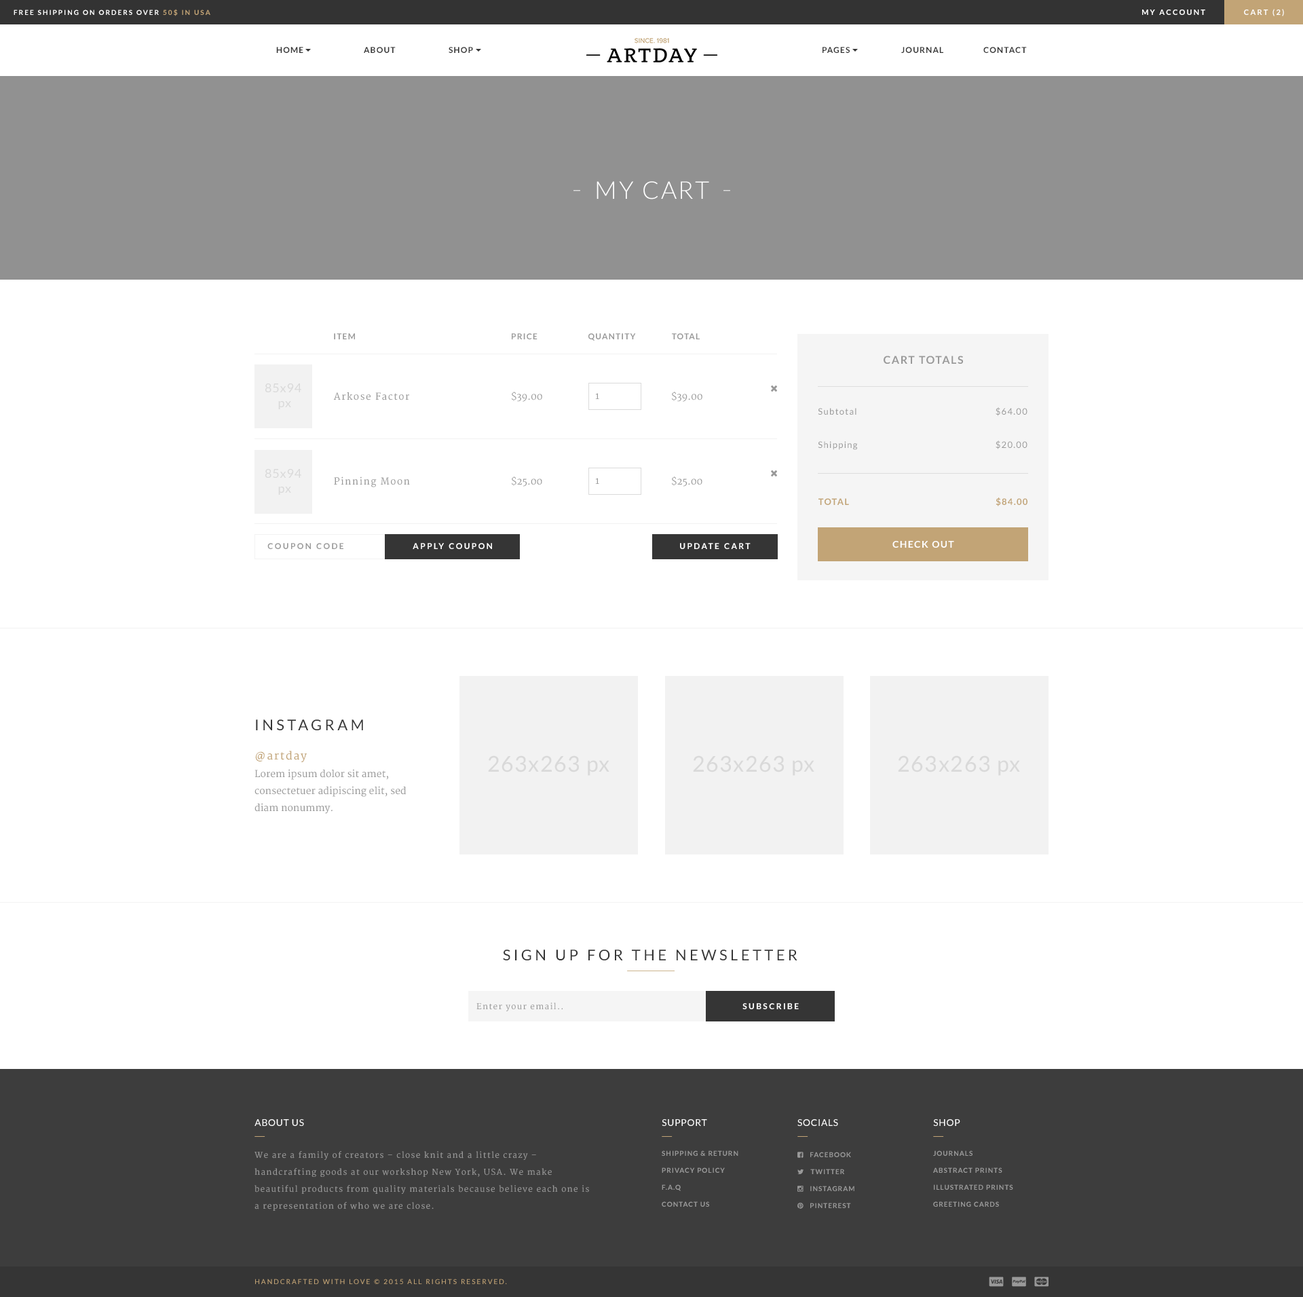
<style>
.page{position:relative;width:1303px;height:1297px;background:#ffffff}
.page>*{position:absolute;margin:0}
.t1{font:6.8px "Lato-Bold";letter-spacing:0.2em;color:#ffffff;text-transform:uppercase}
.t2{font:6.8px "Lato-Bold";letter-spacing:0.2em;color:#c2a476;text-transform:uppercase}
.t3{font:7.5px "Lato-Bold";letter-spacing:0.2em;color:#ffffff;text-transform:uppercase}
.t4{font:8.1px "Lato-Bold";letter-spacing:0.1em;color:#353535;text-transform:uppercase}
.t5{font:24.4px "Lato-Light";letter-spacing:0.075em;color:#ffffff;text-transform:uppercase}
.t6{font:8.1px "Lato-Bold";letter-spacing:0.1em;color:#999999;text-transform:uppercase}
.t7{font:10.9px "Lato-Bold";letter-spacing:0.1em;color:#999999;text-transform:uppercase}
.t8{font:12.2px "Lato-Regular";letter-spacing:0.05em;color:#d9d9d9}
.t9{font:9.5px "Merriweather";letter-spacing:0.1em;color:#999999}
.t10{font:9.5px "Merriweather";color:#999999;text-transform:uppercase}
.t11{font:9.4px "Merriweather";color:#999999;text-transform:uppercase}
.t12{font:8.8px "Lato-Regular";letter-spacing:0.1em;color:#999999}
.t13{font:9.2px "Lato-Bold";letter-spacing:0.1em;color:#c2a476;scale:0.96 1}
.t14{font:9.2px "Lato-Bold";letter-spacing:0.1em;color:#c2a476;text-transform:uppercase;scale:0.96 1}
.t15{font:8.1px "Lato-Bold";letter-spacing:0.2em;color:#999999;text-transform:uppercase}
.t16{font:8.1px "Lato-Bold";letter-spacing:0.2em;color:#ffffff;text-transform:uppercase}
.t17{font:9.5px "Lato-Bold";letter-spacing:0.1em;color:#ffffff;text-transform:uppercase}
.t18{font:14.9px "Lato-Regular";letter-spacing:0.2em;color:#353535;text-transform:uppercase}
.t19{font:10.9px "Merriweather";letter-spacing:0.1em;color:#c2a476}
.t20{font:21.7px "Lato-Regular";letter-spacing:0.05em;color:#d9d9d9}
.t21{font:9.5px/17px "Merriweather";color:#999999}
.t22{font:8.1px "Merriweather";letter-spacing:0.1em;color:#999999}
.t23{font:9.6px "Lato-Regular";letter-spacing:0.05em;color:#ffffff;text-transform:uppercase}
.t24{font:8.1px/17px "Merriweather";letter-spacing:0.1em;color:#999999}
.t25{font:6.8px/17px "Lato-Bold";letter-spacing:0.1em;color:#999999;text-transform:uppercase}
.t26{font:6.8px "Lato-Regular";letter-spacing:0.2em;color:#c2a476;text-transform:uppercase}
</style>
<div class="page">
<p class="t1" style="left:14px;top:9px;width:196px;height:7px">FREE SHIPPING ON ORDERS OVER <span class="t2">50$ IN USA</span></p>
<p class="t3" style="left:1142px;top:10px;width:63px;height:5px">My account</p>
<p class="t3" style="left:1244px;top:9px;width:40px;height:7px">Cart (2)</p>
<p class="t4" style="left:276px;top:47px;width:27px;height:6px">Home</p>
<p class="t4" style="left:364px;top:47px;width:32px;height:6px">About</p>
<p class="t4" style="left:449px;top:47px;width:24px;height:6px">Shop</p>
<p class="t4" style="left:823px;top:47px;width:27px;height:6px">PAges</p>
<p class="t4" style="left:901px;top:47px;width:42px;height:6px">Journal</p>
<p class="t4" style="left:983px;top:47px;width:44px;height:6px">Contact</p>
<p class="t5" style="left:597px;top:181px;width:112px;height:19px">My cart</p>
<p class="t6" style="left:334px;top:333px;width:21px;height:6px">Item</p>
<p class="t6" style="left:512px;top:333px;width:26px;height:6px">price</p>
<p class="t6" style="left:588px;top:333px;width:48px;height:8px">quantity</p>
<p class="t6" style="left:672px;top:333px;width:28px;height:6px">Total</p>
<p class="t7" style="left:884px;top:356px;width:79px;height:8px">Cart Totals</p>
<p class="t8" style="left:265px;top:383px;width:36px;height:26px;text-align:center">85x94 <br>px</p>
<p class="t9" style="left:333px;top:392px;width:76px;height:8px">Arkose Factor</p>
<p class="t10" style="left:512px;top:392px;width:30px;height:10px">$39.00</p>
<p class="t11" style="left:595px;top:393px;width:4px;height:6px">1</p>
<p class="t10" style="left:672px;top:392px;width:30px;height:10px">$39.00</p>
<p class="t12" style="left:818px;top:408px;width:39px;height:7px">Subtotal</p>
<p class="t12" style="left:996px;top:407px;width:32px;height:9px">$64.00</p>
<p class="t12" style="left:818px;top:441px;width:40px;height:9px">Shipping</p>
<p class="t12" style="left:996px;top:440px;width:32px;height:9px">$20.00</p>
<p class="t8" style="left:265px;top:469px;width:36px;height:26px;text-align:center">85x94 <br>px</p>
<p class="t9" style="left:334px;top:476px;width:76px;height:11px">Pinning Moon</p>
<p class="t10" style="left:512px;top:476px;width:30px;height:11px">$25.00</p>
<p class="t11" style="left:595px;top:478px;width:4px;height:6px">1</p>
<p class="t10" style="left:672px;top:476px;width:30px;height:11px">$25.00</p>
<p class="t13" style="left:996px;top:498px;width:32px;height:8px">$84.00</p>
<p class="t14" style="left:819px;top:498px;width:30px;height:7px">Total</p>
<p class="t15" style="left:267px;top:543px;width:76px;height:6px">coupon code</p>
<p class="t16" style="left:413px;top:543px;width:79px;height:6px">apply coupon</p>
<p class="t16" style="left:680px;top:543px;width:71px;height:6px">Update cart</p>
<p class="t17" style="left:893px;top:541px;width:61px;height:7px">Check out</p>
<p class="t18" style="left:256px;top:719px;width:107px;height:11px">Instagram</p>
<p class="t19" style="left:255px;top:751px;width:52px;height:11px">@artday</p>
<p class="t20" style="left:488px;top:755px;width:122px;height:21px">263x263 px</p>
<p class="t20" style="left:693px;top:755px;width:121px;height:21px">263x263 px</p>
<p class="t20" style="left:898px;top:755px;width:122px;height:21px">263x263 px</p>
<p class="t21" style="left:255px;top:769px;width:152px;height:45px">Lorem ipsum dolor sit amet, consectetuer adipiscing elit, sed <br>diam nonummy.</p>
<p class="t18" style="left:503px;top:950px;width:295px;height:10px">Sign up for the newsletter</p>
<p class="t22" style="left:476px;top:1002px;width:87px;height:9px">Enter your email..</p>
<p class="t16" style="left:743px;top:1003px;width:56px;height:6px">Subscribe</p>
<p class="t23" style="left:255px;top:1119px;width:49px;height:7px">About Us</p>
<p class="t23" style="left:662px;top:1119px;width:45px;height:7px">Support</p>
<p class="t23" style="left:798px;top:1119px;width:40px;height:7px">socials</p>
<p class="t23" style="left:933px;top:1119px;width:27px;height:7px">Shop</p>
<p class="t24" style="left:255px;top:1151px;width:334px;height:60px">We are a family of creators – close knit and a little crazy – handcrafting goods at our workshop New York, USA. We make beautiful products from quality materials because believe each one is a representation of who we are close.</p>
<p class="t25" style="left:662px;top:1150px;width:76px;height:57px">SHIPPING &amp; RETURN<br>PRIVACY POLICY<br>F.A.Q<br>CONTACT US</p>
<p class="t25" style="left:933px;top:1150px;width:80px;height:57px">JOURNALS<br>ABSTRACT PRINTS<br>ILLUSTRATED PRINTS<br>GREETING CARDS</p>
<p class="t26" style="left:255px;top:1279px;width:252px;height:5px">HANDCRAFTED WITH LOVE © 2015 ALL RIGHTS RESERVED.</p>
</div>
